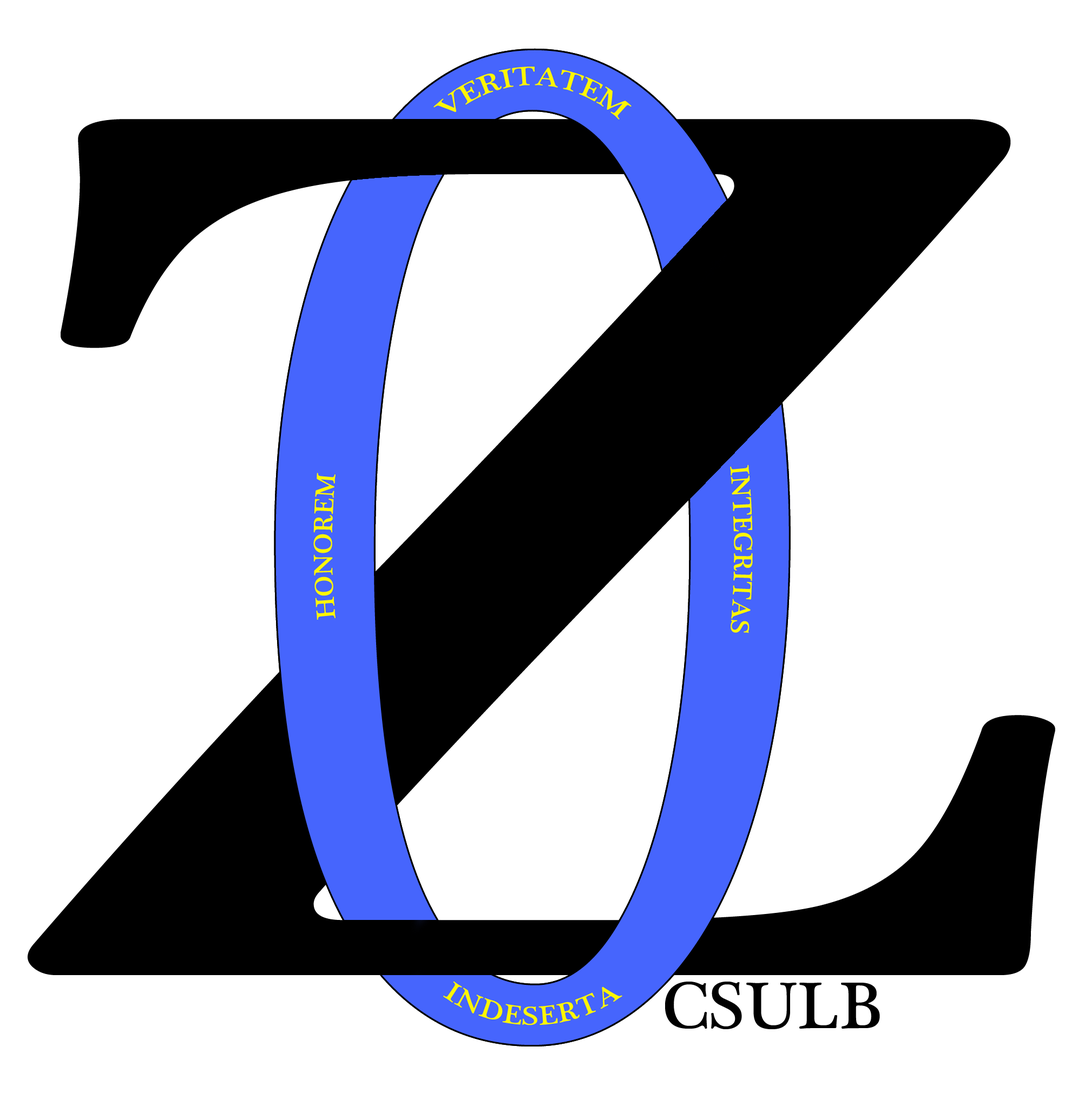
<style>
.page{position:relative;width:1091px;height:1093px;background:#ffffff}
.page>*{position:absolute;margin:0}
.t1{font:27px "PlantagenetCherokee";color:#fff600}
.t2{font:67.6px "PlantagenetCherokee";color:#000000}
</style>
<div class="page">
<p class="t1" style="left:433px;top:67px;width:198px;height:53px">VERITATEM</p>
<p class="t1" style="left:313px;top:473px;width:22px;height:147px;rotate:-90deg">HONOREM</p>
<p class="t1" style="left:730px;top:465px;width:23px;height:168px;rotate:90deg">INTEGRITAS</p>
<p class="t1" style="left:443px;top:981px;width:179px;height:45px">INDESERTA</p>
<p class="t2" style="left:665px;top:982px;width:215px;height:48px">CSULB</p>
</div>
